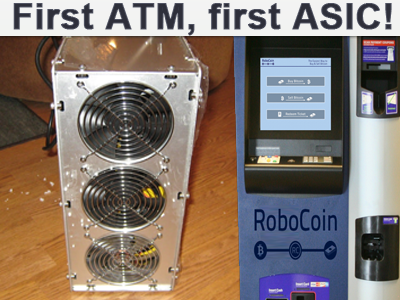
<style>
.page{position:relative;width:400px;height:300px}
.page>*{position:absolute;margin:0}
.t1{font:36px "Arial-BoldMT";font-weight:bold}
</style>
<div class="page">
<p class="t1" style="left:13px;top:3px;width:379px;height:33px">First ATM, first ASIC!</p>
</div>
